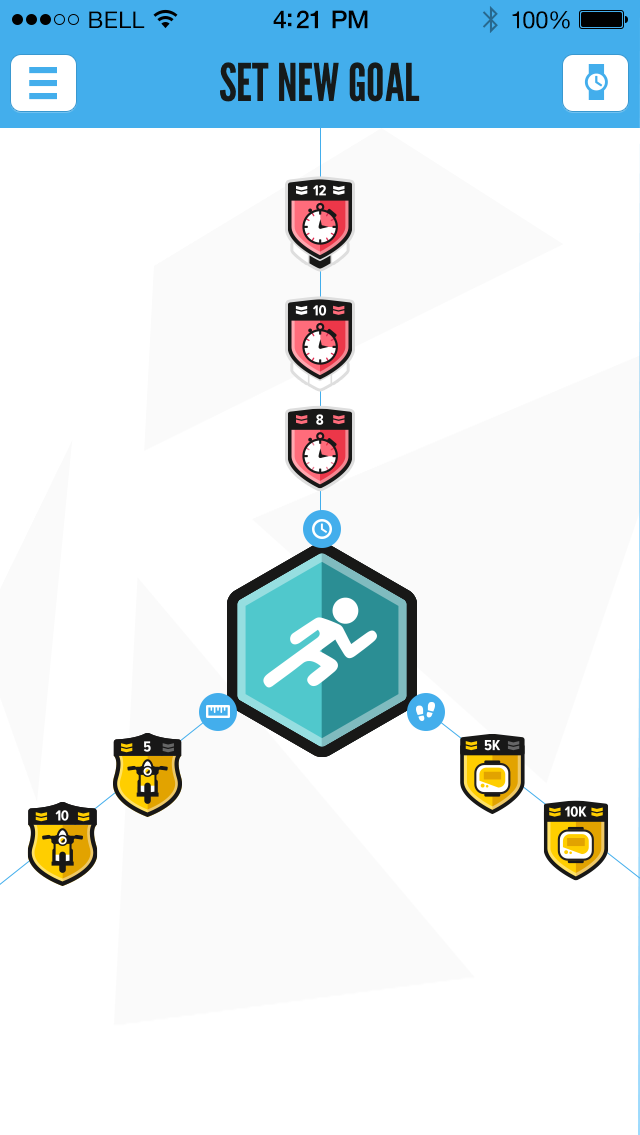
<style>
.page{position:relative;width:640px;height:1135px;background:#ffffff}
.page>*{position:absolute;margin:0}
.t1{font:23px "HelveticaNeue";letter-spacing:0.02em;color:#000000}
.t2{font:25px "HelveticaNeue-Medium";letter-spacing:-0.02em;color:#000000}
.t3{font:24px "HelveticaNeue";letter-spacing:-0.02em;color:#010101}
.t4{font:52px "LeagueGothic";color:#161a1a;text-transform:uppercase}
</style>
<div class="page">
<p class="t1" style="left:89px;top:11px;width:56px;height:17px">BELL</p>
<p class="t2" style="left:273px;top:10px;width:95px;height:19px">4:21 PM</p>
<p class="t3" style="left:512px;top:11px;width:58px;height:18px">100%</p>
<p class="t4" style="left:220px;top:62px;width:200px;height:40px">SET NEW GOAL</p>
</div>
